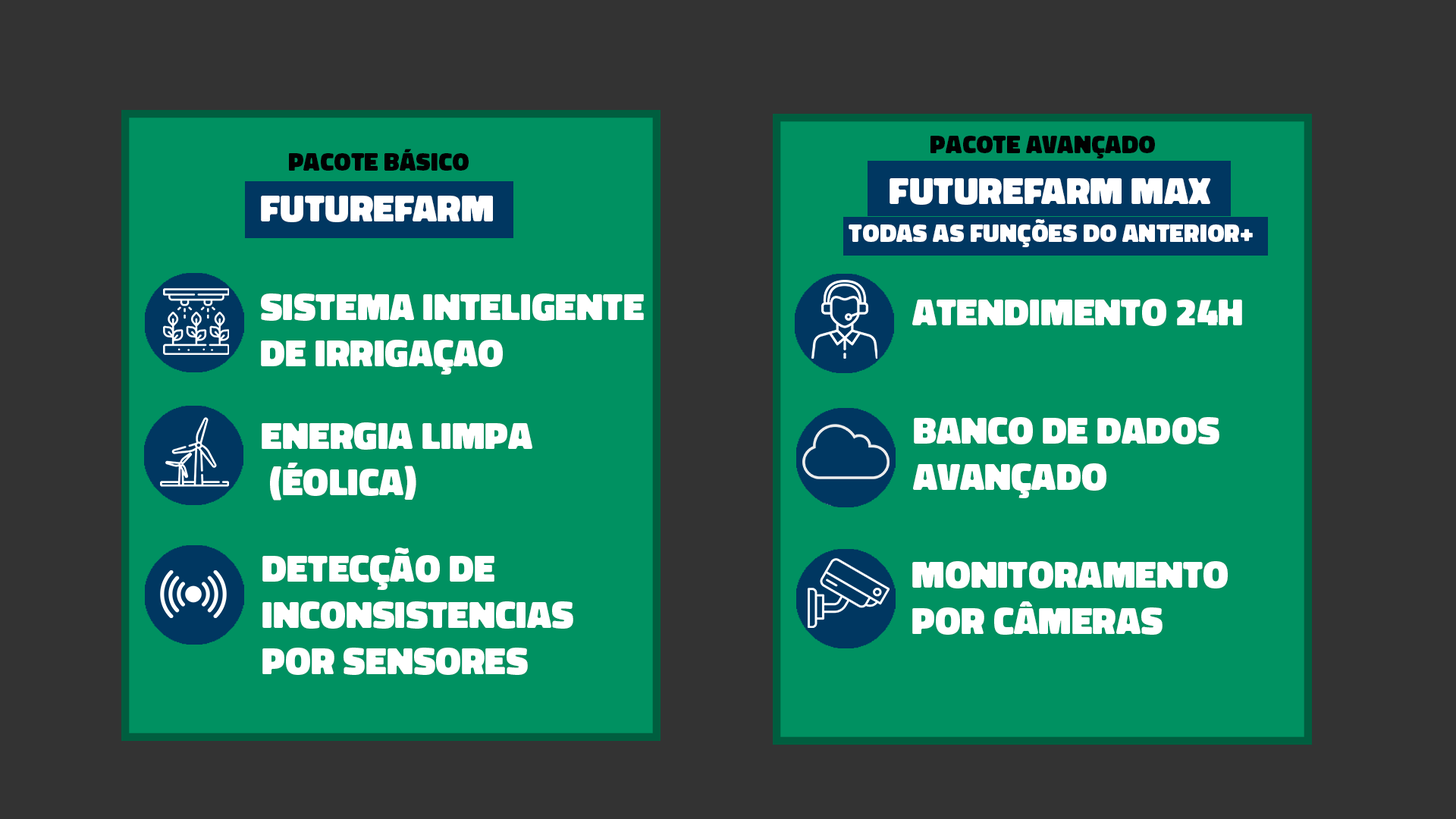
<style>
.page{position:relative;width:1456px;height:819px;background:#333333}
.page>*{position:absolute;margin:0}
.t1{font:25.7px "DonJose-Black";color:#000101}
.t2{font:25.7px "DonJose-Black";color:#010101}
.t3{font:38.5px "DonJose-Black";color:#ffffff}
.t4{font:25.7px "DonJose-Black";color:#ffffff}
</style>
<div class="page">
<p class="t1" style="left:930px;top:136px;width:225px;height:22px">pacote avançado</p>
<p class="t2" style="left:289px;top:149px;width:180px;height:22px">pacote básico</p>
<p class="t3" style="left:890px;top:178px;width:321px;height:27px">fUTUREFARM max</p>
<p class="t3" style="left:261px;top:196px;width:232px;height:26px">fUTUREFARM</p>
<p class="t4" style="left:849px;top:219px;width:404px;height:28px">todas as funções do anterior+</p>
<p class="t3" style="left:261px;top:293px;width:383px;height:82px">SISTEMA INTELIGENTE <br>DE IRRIGAÇAO</p>
<p class="t3" style="left:912px;top:299px;width:330px;height:27px">atendimento 24h</p>
<p class="t3" style="left:262px;top:422px;width:270px;height:78px">energia limpa<br> (éolica)</p>
<p class="t3" style="left:913px;top:417px;width:306px;height:81px">banco de dados <br>avançado</p>
<p class="t3" style="left:262px;top:548px;width:311px;height:127px">DETECÇÃO DE <br>INCONSISTENCIAS <br>POR SENSORES</p>
<p class="t3" style="left:912px;top:561px;width:316px;height:74px">monitoramento <br>por câmeras</p>
</div>
